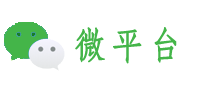
<style>
.page{position:relative;width:200px;height:93px;background:#ffffff}
.page>*{position:absolute;margin:0}
.t1{font:36.8px "STFangsong";letter-spacing:0.14em;color:#44b549;text-transform:uppercase;font-weight:bold;scale:0.87 1}
</style>
<div class="page">
<p class="t1" style="left:75px;top:27px;width:102px;height:37px">微平台</p>
</div>
